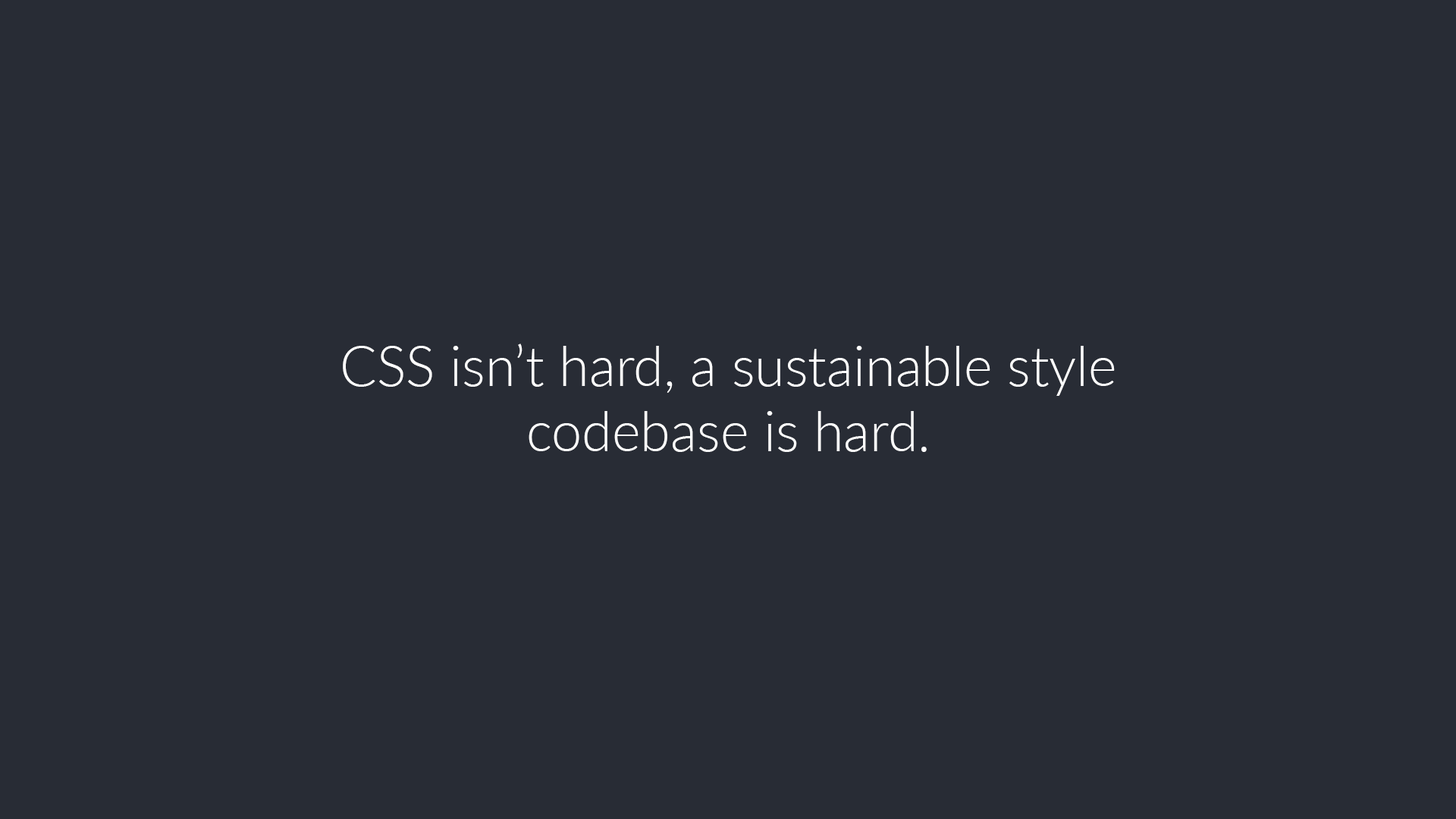
<style>
.page{position:relative;width:1456px;height:819px;background:#282c35}
.page>*{position:absolute;margin:0}
.t1{font:54.6px "Lato-Light";color:#ffffff}
</style>
<div class="page">
<p class="t1" style="left:343px;top:344px;width:772px;height:108px;text-align:center">CSS isn’t hard, a sustainable style codebase is hard.</p>
</div>
